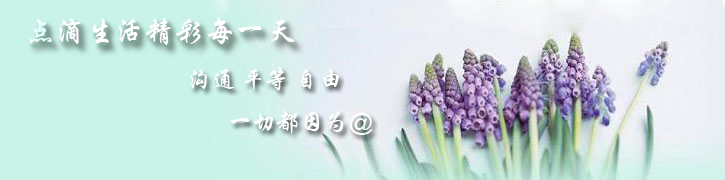
<style>
.page{position:relative;width:725px;height:180px;background:#c9f3e9}
.page>*{position:absolute;margin:0}
.t1{font:24px "STXingkai";color:#ffffff}
</style>
<div class="page">
<p class="t1" style="left:190px;top:67px;width:149px;height:24px">沟通 平等 自由</p>
<p class="t1" style="left:230px;top:110px;width:143px;height:25px">一切都因为@</p>
</div>
